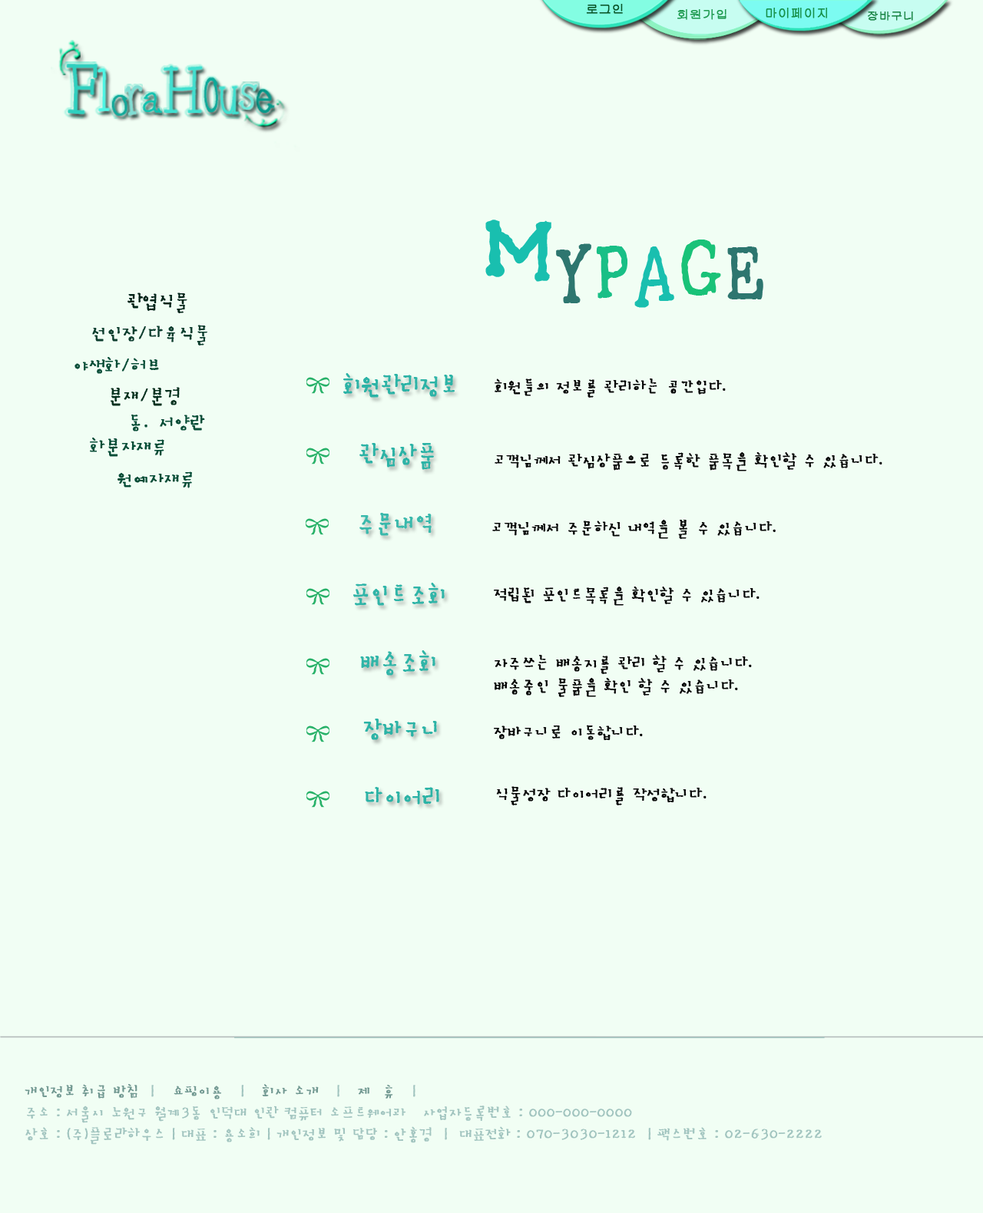
<style>
.page{position:relative;width:983px;height:1213px;background:#f1fef4}
.page>*{position:absolute;margin:0}
.t1{font:11.5px "Gulim";color:#095327;font-weight:bold;scale:1.1 1}
.t2{font:11.5px "Gulim";color:#1e9a50;font-weight:bold;scale:1.1 1}
.t3{font:11.5px "Gulim";color:#168f47;font-weight:bold;scale:1.1 1}
.t4{font:10.4px "Gulim";color:#198445;font-weight:bold;scale:1.13 1}
.t5{font:67.7px "Pinwheel";color:#2ed0bf;font-weight:bold;scale:0.82 1}
.t6{font:59.3px "Pinwheel";color:#4df7e6;font-weight:bold;scale:0.76 1}
.t7{font:36.1px "Pinwheel";color:#10a899;font-weight:bold}
.t8{font:62.6px "Pinwheel";color:#40e0d0;font-weight:bold;scale:0.8 1}
.t9{font:60.9px "Pinwheel";color:#0ba999;font-weight:bold;scale:0.53 1}
.t10{font:45.1px "Pinwheel";color:#40e0d0;font-weight:bold;scale:0.8 1}
.t11{font:45.1px "Pinwheel";color:#06998a;font-weight:bold;scale:0.8 1}
.t12{font:47px "Pinwheel";color:#6feadb;font-weight:bold;scale:0.88 1}
.t13{font:35.6px "Pinwheel";color:#0dc2af;font-weight:bold;scale:0.93 1}
.t14{font:138.2px "SanKrL";color:#19bfaf;text-transform:uppercase;font-weight:bold;scale:0.72 1}
.t15{font:103.7px "SanKrL";color:#2d766f;text-transform:uppercase;font-weight:bold;scale:0.72 1}
.t16{font:103.7px "SanKrL";color:#19bf86;text-transform:uppercase;font-weight:bold;scale:0.72 1}
.t17{font:103.7px "SanKrL";color:#19bfaf;text-transform:uppercase;font-weight:bold;scale:0.72 1}
.t18{font:103.7px "SanKrL";color:#19c278;text-transform:uppercase;font-weight:bold;scale:0.72 1}
.t19{font:21.5px "SanKrL";color:#012419;font-weight:bold}
.t20{font:21.5px "SanKrL";color:#0e3e2f;font-weight:bold}
.t21{font:21.5px "SanKrL";color:#074d37;font-weight:bold}
.t22{font:30.8px "SanKrL";color:#2cb3a6;font-weight:bold;scale:0.86 1}
.t23{font:21.5px "SanKrL";color:#05301e;font-weight:bold}
.t24{font:19.2px "SanKrL";color:#040404;font-weight:bold}
.t25{font:30.8px "SanKrL";color:#3ab9ac;font-weight:bold;scale:0.86 1}
.t26{font:30.8px "SanKrL";color:#30b5a8;font-weight:bold;scale:0.86 1}
.t27{font:17.7px "SanKrL";color:#a1c4bf;font-weight:bold}
.t28{font:17.7px "SanKrL";color:#719891;font-weight:bold}
</style>
<div class="page">
<p class="t1" style="left:586px;top:4px;width:37px;height:10px">로그인</p>
<p class="t2" style="left:677px;top:9px;width:49px;height:11px">회원가입</p>
<p class="t3" style="left:766px;top:8px;width:61px;height:10px">마이페이지</p>
<p class="t4" style="left:868px;top:12px;width:45px;height:9px">장바구니</p>
<p class="t5" style="left:66px;top:64px;width:208px;height:52px">F<span class="t6">l</span><span class="t7">o   </span><span class="t8">H</span><span class="t9">o</span><span class="t10">u </span><span class="t11">e</span></p>
<p class="t12" style="left:238px;top:84px;width:19px;height:26px;rotate:7deg">s</p>
<p class="t13" style="left:142px;top:92px;width:20px;height:21px;rotate:5deg">a</p>
<p class="t14" style="left:485px;top:220px;width:278px;height:88px">M<span class="t15">y</span><span class="t16">p</span><span class="t17">a</span><span class="t18">g</span><span class="t15">e</span></p>
<p class="t19" style="left:127px;top:293px;width:60px;height:20px">관엽식물</p>
<p class="t20" style="left:92px;top:325px;width:115px;height:21px">선인장/다육식물</p>
<p class="t21" style="left:74px;top:357px;width:85px;height:17px">야생화/허브</p>
<p class="t22" style="left:343px;top:373px;width:112px;height:25px">회원관리정보</p>
<p class="t23" style="left:111px;top:387px;width:69px;height:19px">분재/분경</p>
<p class="t24" style="left:495px;top:379px;width:231px;height:19px">회원들의 정보를 관리하는 공간입다.</p>
<p class="t21" style="left:131px;top:415px;width:74px;height:17px">동．서양란</p>
<p class="t21" style="left:90px;top:438px;width:74px;height:19px">화분자재류</p>
<p class="t22" style="left:359px;top:443px;width:75px;height:27px">관심상품</p>
<p class="t24" style="left:495px;top:452px;width:387px;height:19px">고객님께서 관심상품으로 등록한 품목을 확인할 수 있습니다.</p>
<p class="t21" style="left:117px;top:471px;width:75px;height:17px">원예자재류</p>
<p class="t25" style="left:359px;top:513px;width:73px;height:23px">주문내역</p>
<p class="t24" style="left:492px;top:520px;width:284px;height:19px">고객님께서 주문하신 내역을 볼 수 있습니다.</p>
<p class="t26" style="left:353px;top:583px;width:92px;height:23px">포인트조회</p>
<p class="t24" style="left:494px;top:587px;width:265px;height:19px">적립된 포인트목록을 확인할 수 있습니다.</p>
<p class="t26" style="left:360px;top:650px;width:75px;height:26px">배송조회</p>
<p class="t24" style="left:494px;top:655px;width:258px;height:42px">자주쓰는 배송지를 관리 할 수 있습니다.<br>배송중인 물품을 확인 할 수 있습니다.</p>
<p class="t22" style="left:363px;top:719px;width:74px;height:21px">장바구니</p>
<p class="t24" style="left:494px;top:725px;width:149px;height:15px">장바구니로 이동합니다.</p>
<p class="t22" style="left:365px;top:787px;width:74px;height:18px">다이어리</p>
<p class="t24" style="left:496px;top:786px;width:210px;height:19px">식물성장 다이어리를 작성합니다.</p>
<p class="t27" style="left:25px;top:1084px;width:797px;height:61px"><span class="t28">개인정보 취급 방침</span>  |   <span class="t28">쇼핑이용</span>   |   <span class="t28">회사 소개 </span>  |   <span class="t28">제  휴</span>   |<br>주소 : 서울시 노원구 월계3동 인덕대 인관 컴퓨터 소프트웨어과   사업자등록번호 : 000-000-0000   <br>상호 : (주)플로라하우스 | 대표 : 용소희 | 개인정보 및 담당 : 안홍경  |  대표전화 : 070-3030-1212  | 팩스번호 : 02-630-2222</p>
</div>
